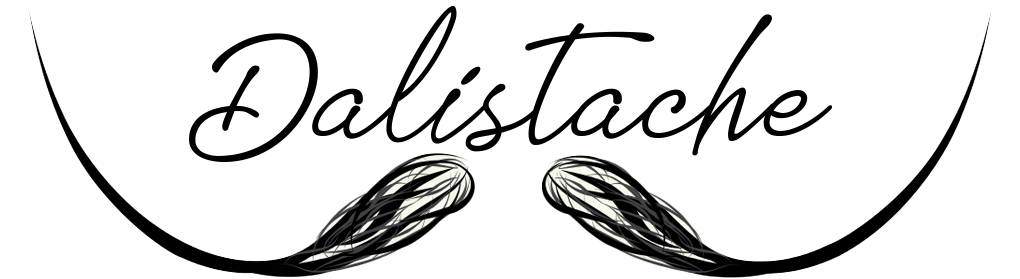
<style>
.page{position:relative;width:1020px;height:279px;background:#ffffff}
.page>*{position:absolute;margin:0}
.t1{font:106.4px "Tomatoes";color:#000000}
</style>
<div class="page">
<p class="t1" style="left:189px;top:6px;width:644px;height:156px">Dalistache</p>
</div>
